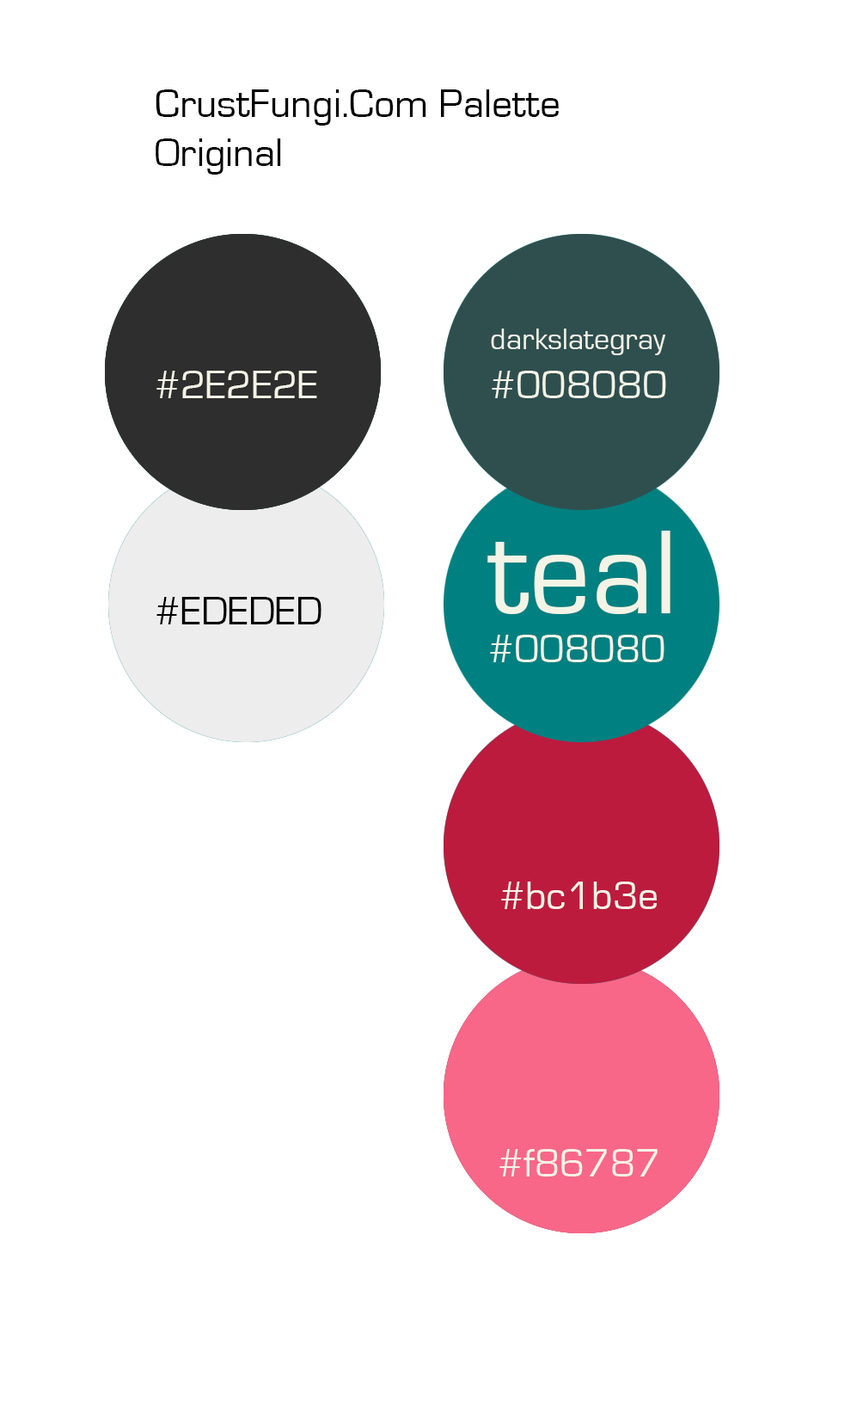
<style>
.page{position:relative;width:851px;height:1401px;background:#ffffff}
.page>*{position:absolute;margin:0}
.t1{font:41.3px "EurostileRegular";color:#000000}
.t2{font:31px "EurostileRegular";color:#f4f4e6}
.t3{font:41.3px "EurostileRegular";color:#f4f4e6}
.t4{font:123.8px "EurostileRegular";color:#f4f4e6}
</style>
<div class="page">
<p class="t1" style="left:156px;top:89px;width:403px;height:86px">CrustFungi.Com Palette<br>Original</p>
<p class="t2" style="left:491px;top:328px;width:175px;height:70px">darkslategray<br><span class="t3">#008080</span></p>
<p class="t3" style="left:156px;top:371px;width:161px;height:27px"><span class="t2"><br></span>#2E2E2E</p>
<p class="t3" style="left:488px;top:531px;width:183px;height:131px"><span class="t4">teal<br></span>#008080</p>
<p class="t1" style="left:156px;top:597px;width:166px;height:27px"><span class="t2"><br></span>#EDEDED</p>
<p class="t3" style="left:501px;top:881px;width:156px;height:28px"><span class="t4"><br></span>#bc1b3e</p>
<p class="t3" style="left:500px;top:1149px;width:158px;height:27px"><span class="t4"><br></span>#f86787</p>
</div>
